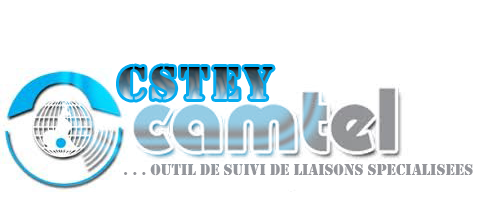
<style>
.page{position:relative;width:484px;height:200px;background:#ffffff}
.page>*{position:absolute;margin:0}
.t1{font:48px "Stencil";letter-spacing:0.075em}
.t2{font:16px "Stencil";color:#94959a}
</style>
<div class="page">
<p class="t1" style="left:119px;top:66px;width:154px;height:34px">CSTEY</p>
<p class="t2" style="left:124px;top:164px;width:349px;height:12px">. . . outil DE sUIVI DE LIAISONS SPECIALISEES</p>
</div>
